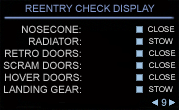
<style>
.page{position:relative;width:179px;height:110px;background:#020000}
.page>*{position:absolute;margin:0}
.t1{font:10px "ArialMT";color:#8298cc;font-variant:small-caps}
.t2{font:10px "ArialMT";color:#cdcdcd;font-variant:small-caps}
.t3{font:8px "ArialMT";font-variant:small-caps}
.t4{font:10px "ArialMT";color:#9fc3e3;font-variant:small-caps}
</style>
<div class="page">
<p class="t1" style="left:25px;top:4px;width:130px;height:8px">REENTRY CHECK DISPLAY</p>
<p class="t2" style="left:22px;top:25px;width:59px;height:8px">NOSECONE:</p>
<p class="t3" style="left:148px;top:26px;width:27px;height:6px">CLOSE</p>
<p class="t2" style="left:29px;top:37px;width:52px;height:8px">RADIATOR:</p>
<p class="t3" style="left:149px;top:38px;width:24px;height:6px">STOW</p>
<p class="t2" style="left:5px;top:49px;width:76px;height:8px">RETRO DOORS:</p>
<p class="t3" style="left:149px;top:50px;width:27px;height:6px">CLOSE</p>
<p class="t2" style="left:3px;top:61px;width:78px;height:8px">SCRAM DOORS:</p>
<p class="t3" style="left:149px;top:62px;width:27px;height:6px">CLOSE</p>
<p class="t2" style="left:5px;top:73px;width:77px;height:8px">HOVER DOORS:</p>
<p class="t3" style="left:149px;top:74px;width:27px;height:6px">CLOSE</p>
<p class="t2" style="left:4px;top:85px;width:77px;height:8px">LANDING GEAR:</p>
<p class="t3" style="left:149px;top:86px;width:24px;height:6px">STOW</p>
<p class="t4" style="left:161px;top:98px;width:6px;height:8px">9</p>
</div>
